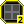
<style>
.page{position:relative;width:24px;height:24px;background:#4b4b4b}
.page>*{position:absolute;margin:0}
.t1{font:9px "Montserrat-Bold";color:#000000}
</style>
<div class="page">
<p class="t1" style="left:18px;top:16px;width:5px;height:7px">2</p>
</div>
